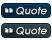
<style>
.page{position:relative;width:52px;height:40px;background:#ffffff}
.page>*{position:absolute;margin:0}
.t1{font:35px "SFOldRepublic";color:#f6f6f6}
.t2{font:11px "SFOldRepublic";color:#efefef;font-style:italic}
</style>
<div class="page">
<p class="t1" style="left:5px;top:8px;width:8px;height:5px">“</p>
<p class="t2" style="left:16px;top:7px;width:31px;height:8px">Quote</p>
<p class="t1" style="left:5px;top:28px;width:8px;height:5px">“</p>
<p class="t2" style="left:16px;top:27px;width:31px;height:8px">Quote</p>
</div>
